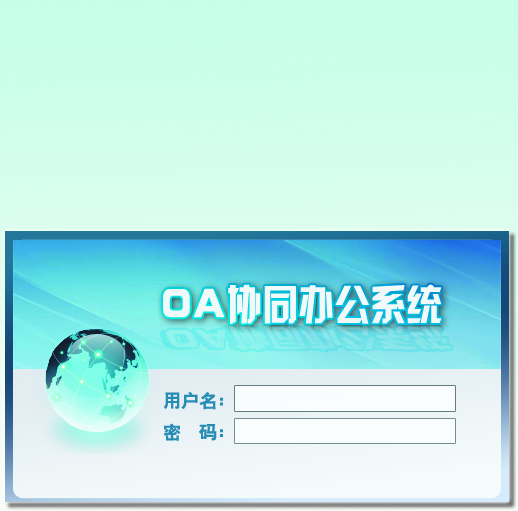
<style>
.page{position:relative;width:518px;height:511px}
.page>*{position:absolute;margin:0}
.t1{font:42px "HYk2gj";color:#f2faf9;scale:0.86 1}
.t2{font:18px "HeitiCSEG";color:#278cb5}
</style>
<div class="page">
<p class="t1" style="left:163px;top:284px;width:279px;height:41px">OA协同办公系统</p>
<p class="t2" style="left:163px;top:391px;width:60px;height:50px">用户名:<br>密  码:</p>
</div>
